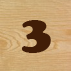
<style>
.page{position:relative;width:71px;height:71px}
.page>*{position:absolute;margin:0}
.t1{font:50px "CooperBlack";color:#411d07}
</style>
<div class="page">
<p class="t1" style="left:21px;top:20px;width:30px;height:33px">3</p>
</div>
